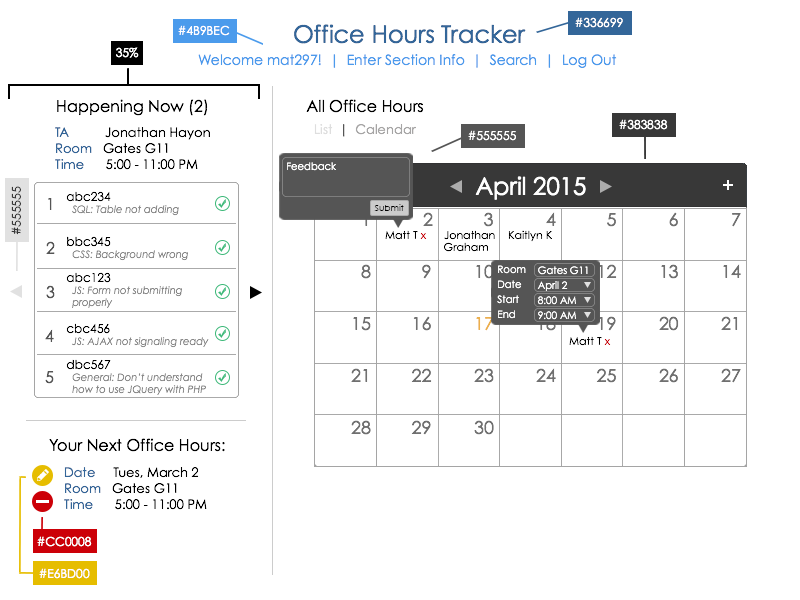
<style>
.page{position:relative;width:800px;height:600px;background:#ffffff}
.page>*{position:absolute;margin:0}
.t1{font:12px "CenturyGothic";color:#ffffff}
.t2{font:24px "CenturyGothic";color:#336699}
.t3{font:14px "CenturyGothic";color:#4b9bec}
.t4{font:16px "CenturyGothic";color:#000000}
.t5{font:13px "CenturyGothic";color:#a6a5a5}
.t6{font:13px "CenturyGothic";color:#dedede}
.t7{font:13px "CenturyGothic";color:#555555}
.t8{font:13px "CenturyGothic";color:#000000}
.t9{font:13px "CenturyGothic";color:#336699}
.t10{font:10px "CenturyGothic";color:#ffffff}
.t11{font:24px "CenturyGothic";color:#ffffff}
.t12{font:12px "CenturyGothic"}
.t13{font:16px "CenturyGothic";color:#555555}
.t14{font:10px "CenturyGothic-Italic";color:#888888}
.t15{font:12px "CenturyGothic";color:#000000}
.t16{font:8.7px "CenturyGothic";color:#000000}
.t17{font:18px/52px "CenturyGothic";color:#707070}
.t18{font:18px/52px "CenturyGothic";color:#000000}
.t19{font:18px/52px "CenturyGothic";color:#ecb04b}
.t20{font:11px "CenturyGothic";color:#000000}
.t21{font:11px "CenturyGothic";color:#cc0008}
.t22{font:10px/15px "CenturyGothic";color:#ffffff}
</style>
<div class="page">
<p class="t1" style="left:575px;top:17px;width:48px;height:11px">#336699</p>
<p class="t1" style="left:178px;top:25px;width:52px;height:11px">#4B9BEC</p>
<p class="t2" style="left:294px;top:24px;width:232px;height:20px">Office Hours Tracker</p>
<p class="t1" style="left:116px;top:47px;width:23px;height:11px">35%</p>
<p class="t3" style="left:198px;top:54px;width:419px;height:14px">Welcome mat297!  |  Enter Section Info  |  Search  |  Log Out</p>
<p class="t4" style="left:57px;top:99px;width:151px;height:17px">Happening Now (2)</p>
<p class="t4" style="left:306px;top:99px;width:118px;height:14px">All Office Hours</p>
<p class="t5" style="left:314px;top:124px;width:102px;height:13px"><span class="t6">List  </span><span class="t7">|  </span>Calendar</p>
<p class="t1" style="left:619px;top:119px;width:49px;height:11px">#383838</p>
<p class="t8" style="left:55px;top:127px;width:155px;height:43px"><span class="t9">TA          </span>Jonathan Hayon<br><span class="t9">Room   </span>Gates G11<br><span class="t9">Time      </span>5:00 - 11:00 PM</p>
<p class="t1" style="left:468px;top:130px;width:48px;height:11px">#555555</p>
<p class="t10" style="left:287px;top:162px;width:49px;height:9px">Feedback</p>
<p class="t11" style="left:475px;top:176px;width:111px;height:24px">April 2015</p>
<p class="t12" style="left:11px;top:186px;width:10px;height:49px;rotate:-90deg">#555555</p>
<p class="t13" style="left:48px;top:198px;width:4px;height:12px">1</p>
<p class="t14" style="left:66px;top:191px;width:113px;height:25px"><span class="t15">abc234<br></span>  SQL: Table not adding</p>
<p class="t16" style="left:374px;top:204px;width:30px;height:7px">Submit</p>
<p class="t17" style="left:351px;top:212px;width:390px;height:223px"><span class="t18">  </span>1       2      3     4         5       6     7<br>  8        9    10          11       12     13   14<br>15      16    <span class="t19">17 </span>  18       19     20   21<br>21      22    23   24       25     26   27<br>28      29    30</p>
<p class="t20" style="left:385px;top:230px;width:42px;height:10px">Matt T <span class="t21">x</span></p>
<p class="t20" style="left:444px;top:230px;width:51px;height:10px">Jonathan</p>
<p class="t20" style="left:508px;top:230px;width:44px;height:12px">Kaitlyn K</p>
<p class="t13" style="left:46px;top:241px;width:9px;height:13px">2</p>
<p class="t14" style="left:67px;top:236px;width:121px;height:25px"><span class="t15">bbc345<br></span>  CSS: Background wrong</p>
<p class="t20" style="left:444px;top:242px;width:44px;height:10px">Graham</p>
<p class="t22" style="left:497px;top:265px;width:29px;height:54px">Room<br>Date<br>Start<br>End</p>
<p class="t22" style="left:537px;top:266px;width:51px;height:54px">Gates G11<br>April 2<br>8:00 AM<br>9:00 AM</p>
<p class="t14" style="left:66px;top:272px;width:116px;height:36px"><span class="t15">abc123<br></span>  JS: Form not submitting<br>  properly</p>
<p class="t13" style="left:46px;top:285px;width:9px;height:14px">3</p>
<p class="t13" style="left:45px;top:329px;width:9px;height:13px">4</p>
<p class="t14" style="left:66px;top:323px;width:143px;height:25px"><span class="t15">cbc456<br></span>  JS: AJAX not signaling ready</p>
<p class="t20" style="left:569px;top:336px;width:42px;height:10px">Matt T <span class="t21">x</span></p>
<p class="t14" style="left:66px;top:359px;width:140px;height:36px"><span class="t15">dbc567<br></span>  General: Don’t understand <br>  how to use JQuery with PHP</p>
<p class="t13" style="left:45px;top:371px;width:9px;height:13px">5</p>
<p class="t4" style="left:49px;top:438px;width:176px;height:14px">Your Next Office Hours:</p>
<p class="t8" style="left:64px;top:467px;width:143px;height:43px"><span class="t9">Date     </span>Tues, March 2<br><span class="t9">Room   </span>Gates G11<br><span class="t9">Time      </span>5:00 - 11:00 PM</p>
<p class="t1" style="left:37px;top:536px;width:55px;height:11px">#CC0008</p>
<p class="t1" style="left:39px;top:568px;width:51px;height:11px">#E6BD00</p>
</div>
